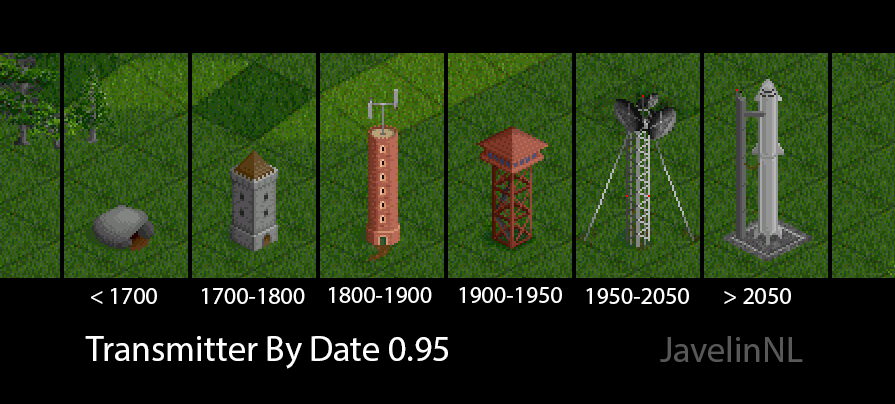
<style>
.page{position:relative;width:895px;height:404px;background:#000000}
.page>*{position:absolute;margin:0}
.t1{font:24px "MyriadPro-Regular";color:#ffffff}
.t2{font:36px "MyriadPro-Regular";color:#ffffff}
.t3{font:36px "MyriadPro-Regular";color:#585858}
</style>
<div class="page">
<p class="t1" style="left:91px;top:288px;width:66px;height:16px">&lt; 1700</p>
<p class="t1" style="left:202px;top:288px;width:103px;height:16px">1700-1800</p>
<p class="t1" style="left:329px;top:287px;width:103px;height:16px">1800-1900</p>
<p class="t1" style="left:459px;top:287px;width:103px;height:16px">1900-1950</p>
<p class="t1" style="left:586px;top:288px;width:103px;height:16px">1950-2050</p>
<p class="t1" style="left:724px;top:288px;width:67px;height:16px">&gt; 2050</p>
<p class="t2" style="left:85px;top:336px;width:363px;height:33px">Transmitter By Date 0.95</p>
<p class="t3" style="left:660px;top:336px;width:143px;height:26px">JavelinNL</p>
</div>
